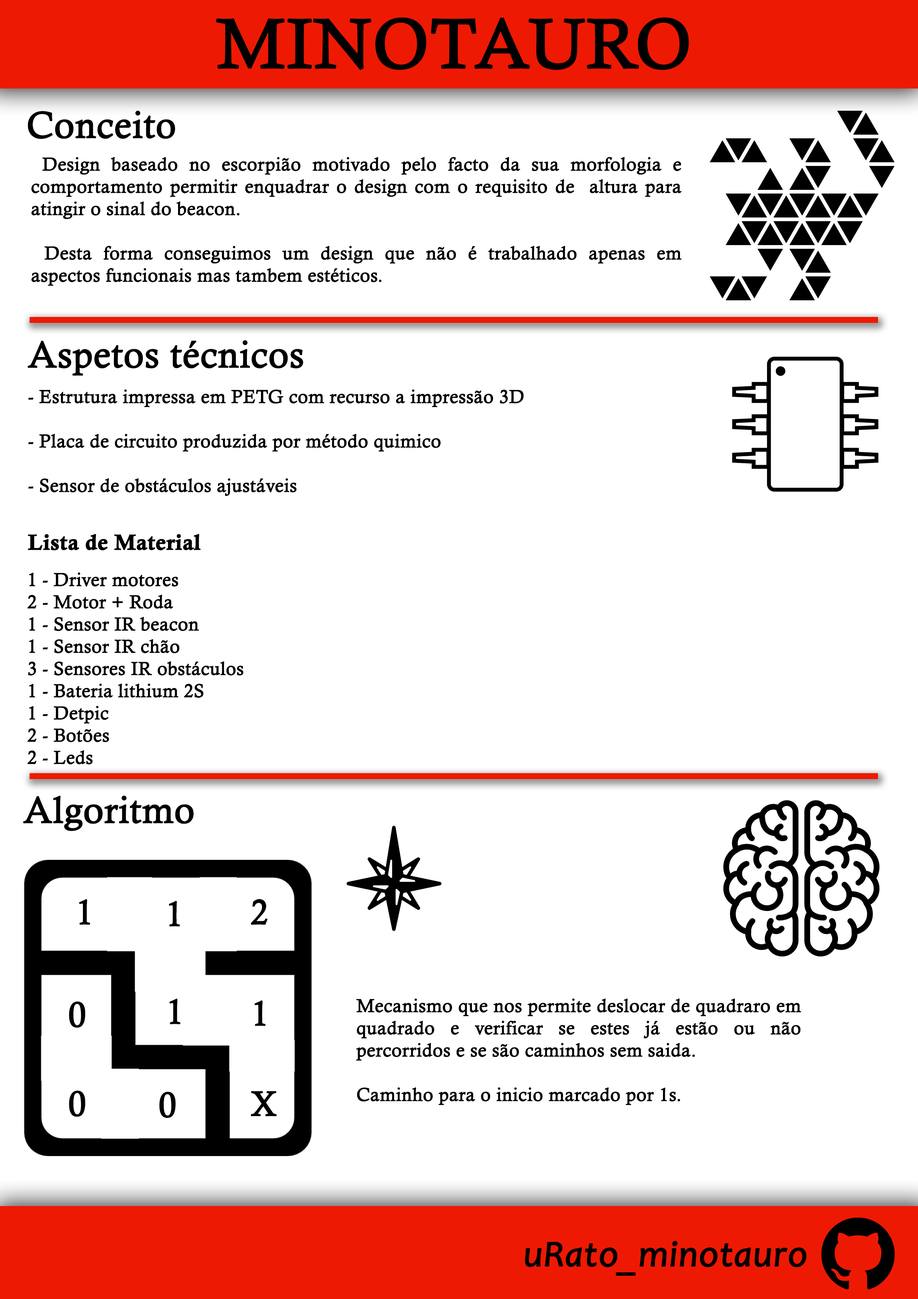
<style>
.page{position:relative;width:918px;height:1299px;background:#ffffff}
.page>*{position:absolute;margin:0}
.t1{font:69.9px "CalistoMT";color:#000000;font-weight:bold}
.t2{font:37px "CalistoMT";color:#000000;font-weight:bold}
.t3{font:18.5px "CalistoMT";color:#000000;font-weight:bold}
.t4{font:21.6px "CalisMTBol";color:#000000;font-weight:bold}
.t5{font:37.1px "CalistoMT";color:#000000;font-weight:bold}
.t6{font:34.9px "CalistoMT";color:#000000;font-weight:bold}
.t7{font:36.9px "Candara-Italic";color:#000000;font-weight:bold}
</style>
<div class="page">
<p class="t1" style="left:216px;top:17px;width:473px;height:53px">MINOTAURO</p>
<p class="t2" style="left:28px;top:110px;width:147px;height:29px">Conceito</p>
<p class="t3" style="left:31px;top:157px;width:651px;height:129px;text-align:justify">Design baseado no escorpião motivado pelo facto da sua morfologia e comportamento permitir enquadrar o design com o requisito de  altura para atingir o sinal do beacon.<br> <br> Desta forma conseguimos um design que não é trabalhado apenas em aspectos funcionais mas tambem estéticos.</p>
<p class="t2" style="left:28px;top:340px;width:275px;height:36px">Aspetos técnicos</p>
<p class="t3" style="left:28px;top:389px;width:496px;height:107px;text-align:justify">- Estrutura impressa em PETG com recurso a impressão 3D<br><br>- Placa de circuito produzida por método quimico<br><br>- Sensor de obstáculos ajustáveis</p>
<p class="t4" style="left:28px;top:533px;width:173px;height:18px">Lista de Material</p>
<p class="t3" style="left:27px;top:572px;width:217px;height:193px;text-align:justify">1 - Driver motores<br>2 - Motor + Roda<br>1 - Sensor IR beacon<br>1 - Sensor IR chão<br>3 - Sensores IR obstáculos<br>1 - Bateria lithium 2S<br>1 - Detpic<br>2 - Botões<br>2 - Leds</p>
<p class="t5" style="left:23px;top:795px;width:171px;height:36px">Algoritmo</p>
<p class="t6" style="left:79px;top:899px;width:11px;height:26px">1</p>
<p class="t6" style="left:169px;top:900px;width:11px;height:26px">1</p>
<p class="t6" style="left:251px;top:899px;width:17px;height:26px">2</p>
<p class="t6" style="left:69px;top:1001px;width:17px;height:27px">0</p>
<p class="t6" style="left:170px;top:998px;width:11px;height:26px">1</p>
<p class="t6" style="left:255px;top:1000px;width:11px;height:26px">1</p>
<p class="t3" style="left:356px;top:998px;width:445px;height:107px;text-align:justify">Mecanismo que nos permite deslocar de quadraro em quadrado e verificar se estes já estão ou não percorridos e se são caminhos sem saida.<br><br>Caminho para o inicio marcado por 1s.</p>
<p class="t6" style="left:69px;top:1090px;width:17px;height:27px">0</p>
<p class="t6" style="left:159px;top:1091px;width:17px;height:27px">0</p>
<p class="t6" style="left:251px;top:1091px;width:26px;height:25px">X</p>
<p class="t7" style="left:525px;top:1241px;width:282px;height:35px">uRato_minotauro</p>
</div>
